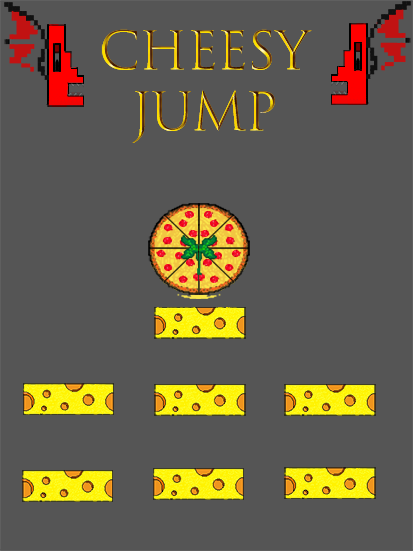
<style>
.page{position:relative;width:413px;height:551px;background:#555555}
.page>*{position:absolute;margin:0}
.t1{font:51.1px "TrajanColor-Concept";letter-spacing:-0.01em;text-transform:uppercase}
</style>
<div class="page">
<p class="t1" style="left:101px;top:28px;width:211px;height:115px;text-align:center">Cheesy Jump</p>
</div>
